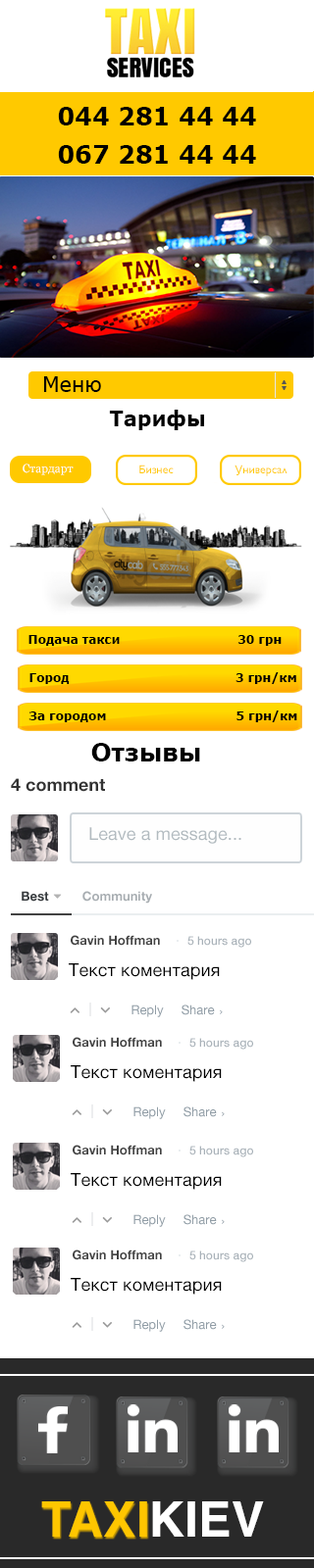
<style>
.page{position:relative;width:314px;height:1568px;background:#ffffff}
.page>*{position:absolute;margin:0}
.t1{font:24.5px "Verdana-Bold";color:#010101}
.t2{font:24.5px "Verdana-Bold";color:#000000}
.t3{font:20.4px "Verdana";color:#000000}
.t4{font:20.6px "Verdana-Bold";color:#000000}
.t5{font:11.8px "Georgia";color:#fefefe}
.t6{font:11.8px "GillSans";color:#ffc900}
.t7{font:11.8px "Verdana-Bold";color:#000000}
.t8{font:17.6px "HelveticaNeue-Bold";color:#333333}
.t9{font:17.6px "HelveticaNeue";letter-spacing:0.005em;color:#b2bbc0}
.t10{font:12.7px "HelveticaNeue-Bold";color:#a7adb1}
.t11{font:12.7px "HelveticaNeue-Bold";color:#424242}
.t12{font:11.8px "HelveticaNeue-Medium";color:#a9b2b9}
.t13{font:17.6px "HelveticaNeue";letter-spacing:0.005em;color:#000000}
.t14{font:49px "Helvetica-Bold";color:#ffc600}
.t15{font:49px "Helvetica-Bold";color:#ffffff}
</style>
<div class="page">
<p class="t1" style="left:58px;top:107px;width:198px;height:18px">044 281 44 44</p>
<p class="t2" style="left:58px;top:145px;width:198px;height:19px">067 281 44 44</p>
<p class="t3" style="left:43px;top:376px;width:58px;height:16px">Меню</p>
<p class="t4" style="left:109px;top:410px;width:95px;height:20px">Тарифы</p>
<p class="t5" style="left:23px;top:464px;width:51px;height:11px">Стардарт</p>
<p class="t6" style="left:139px;top:465px;width:34px;height:9px">Бизнес</p>
<p class="t6" style="left:234px;top:465px;width:53px;height:11px">Универсал</p>
<p class="t7" style="left:28px;top:635px;width:253px;height:11px">Подача такси                             30 грн</p>
<p class="t7" style="left:29px;top:672px;width:267px;height:12px">Город                                         3 грн/км</p>
<p class="t7" style="left:28px;top:710px;width:269px;height:12px">За городом                                5 грн/км</p>
<p class="t2" style="left:91px;top:743px;width:109px;height:18px">Отзывы</p>
<p class="t8" style="left:11px;top:778px;width:94px;height:14px">4 comment</p>
<p class="t9" style="left:89px;top:827px;width:152px;height:17px">Leave a message...</p>
<p class="t10" style="left:82px;top:891px;width:70px;height:13px">Community</p>
<p class="t11" style="left:71px;top:935px;width:89px;height:11px">Gavin Hoffman</p>
<p class="t12" style="left:187px;top:936px;width:64px;height:12px">5 hours ago</p>
<p class="t13" style="left:69px;top:963px;width:151px;height:17px">Текст коментария</p>
<p class="t11" style="left:73px;top:1037px;width:89px;height:11px">Gavin Hoffman</p>
<p class="t12" style="left:189px;top:1038px;width:64px;height:12px">5 hours ago</p>
<p class="t13" style="left:71px;top:1065px;width:150px;height:17px">Текст коментария</p>
<p class="t11" style="left:73px;top:1145px;width:89px;height:10px">Gavin Hoffman</p>
<p class="t12" style="left:189px;top:1146px;width:64px;height:11px">5 hours ago</p>
<p class="t13" style="left:71px;top:1173px;width:150px;height:17px">Текст коментария</p>
<p class="t11" style="left:73px;top:1250px;width:89px;height:10px">Gavin Hoffman</p>
<p class="t12" style="left:189px;top:1250px;width:64px;height:12px">5 hours ago</p>
<p class="t13" style="left:71px;top:1278px;width:150px;height:17px">Текст коментария</p>
<p class="t14" style="left:41px;top:1501px;width:106px;height:36px">TAXI</p>
<p class="t15" style="left:152px;top:1501px;width:112px;height:36px">KIEV</p>
</div>
